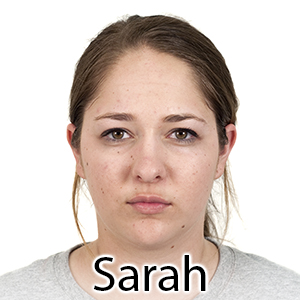
<style>
.page{position:relative;width:300px;height:300px;background:#ffffff}
.page>*{position:absolute;margin:0}
.t1{font:50px "MyriadPro-Regular";color:#000000}
</style>
<div class="page">
<p class="t1" style="left:93px;top:255px;width:113px;height:36px">Sarah</p>
</div>
